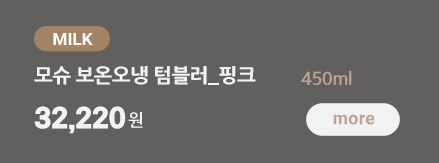
<style>
.page{position:relative;width:439px;height:163px;background:#62605e}
.page>*{position:absolute;margin:0}
.t1{font:17px "Roboto-Bold";color:#ffffff}
.t2{font:20px "NanumGothicExtraBold";letter-spacing:-0.03em;color:#f2f2f2}
.t3{font:18px "NanumGothicBold";letter-spacing:-0.03em;color:#c1a397}
.t4{font:25px "DXBangtangoStd-Regular";color:#f2f2f2}
.t5{font:17px "NanumGothicBold";letter-spacing:-0.05em;color:#f2f2f2}
.t6{font:17.7px "Roboto-Bold";letter-spacing:0.02em;color:#c1a397}
</style>
<div class="page">
<p class="t1" style="left:53px;top:33px;width:40px;height:12px">MILK</p>
<p class="t2" style="left:34px;top:66px;width:222px;height:19px">모슈 보온오냉 텀블러_핑크</p>
<p class="t3" style="left:301px;top:70px;width:51px;height:15px">450ml</p>
<p class="t4" style="left:34px;top:106px;width:109px;height:28px">32,220<span class="t5">원</span></p>
<p class="t6" style="left:333px;top:114px;width:42px;height:11px">more</p>
</div>
